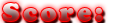
<style>
.page{position:relative;width:119px;height:23px}
.page>*{position:absolute;margin:0}
.t1{font:25.6px "CooperBlackStd";letter-spacing:0.125em}
</style>
<div class="page">
<p class="t1" style="left:2px;top:3px;width:100px;height:18px">Score:</p>
</div>
